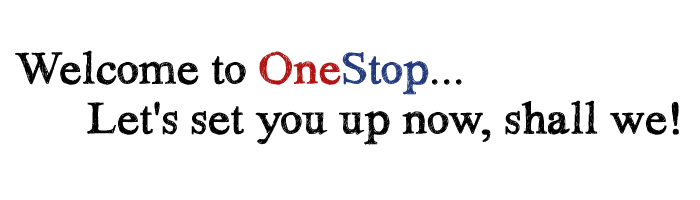
<style>
.page{position:relative;width:700px;height:200px;background:#ffffff}
.page>*{position:absolute;margin:0}
.t1{font:48px/50px "HandTIMES";color:#000000}
.t2{font:48px/50px "HandTIMES";color:#b01515}
.t3{font:48px/50px "HandTIMES";color:#22397b}
</style>
<div class="page">
<p class="t1" style="left:15px;top:50px;width:664px;height:95px">Welcome to <span class="t2">One</span><span class="t3">Stop</span>...<br>      Let's set you up now, shall we!</p>
</div>
